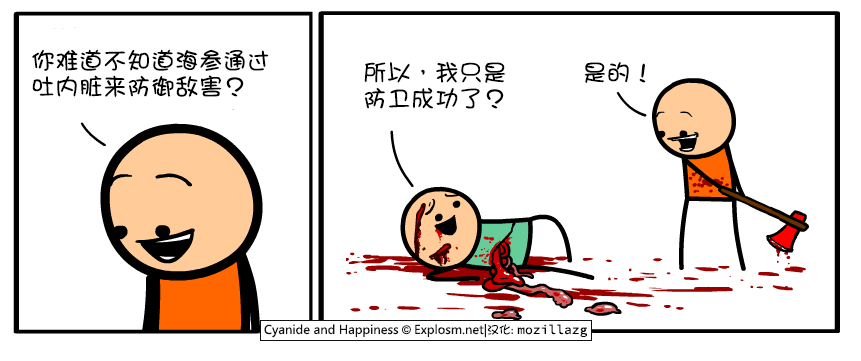
<style>
.page{position:relative;width:861px;height:361px;background:#ffffff}
.page>*{position:absolute;margin:0}
.t1{font:24px/26px "DFGirl";color:#000000}
.t2{font:24px "DFGirl";color:#000000}
</style>
<div class="page">
<p class="t1" style="left:32px;top:49px;width:237px;height:49px">你难道不知道海参通过<br>吐内脏来防御敌害？</p>
<p class="t1" style="left:364px;top:61px;width:142px;height:48px">所以，我只是<br>防卫成功了？</p>
<p class="t2" style="left:584px;top:62px;width:62px;height:21px">是的！</p>
</div>
